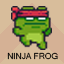
<style>
.page{position:relative;width:64px;height:64px;background:#d8bd9b}
.page>*{position:absolute;margin:0}
.t1{font:8.3px "MicrosoftSansSerif";color:#000000}
</style>
<div class="page">
<p class="t1" style="left:7px;top:52px;width:51px;height:8px">NINJA FROG</p>
</div>
